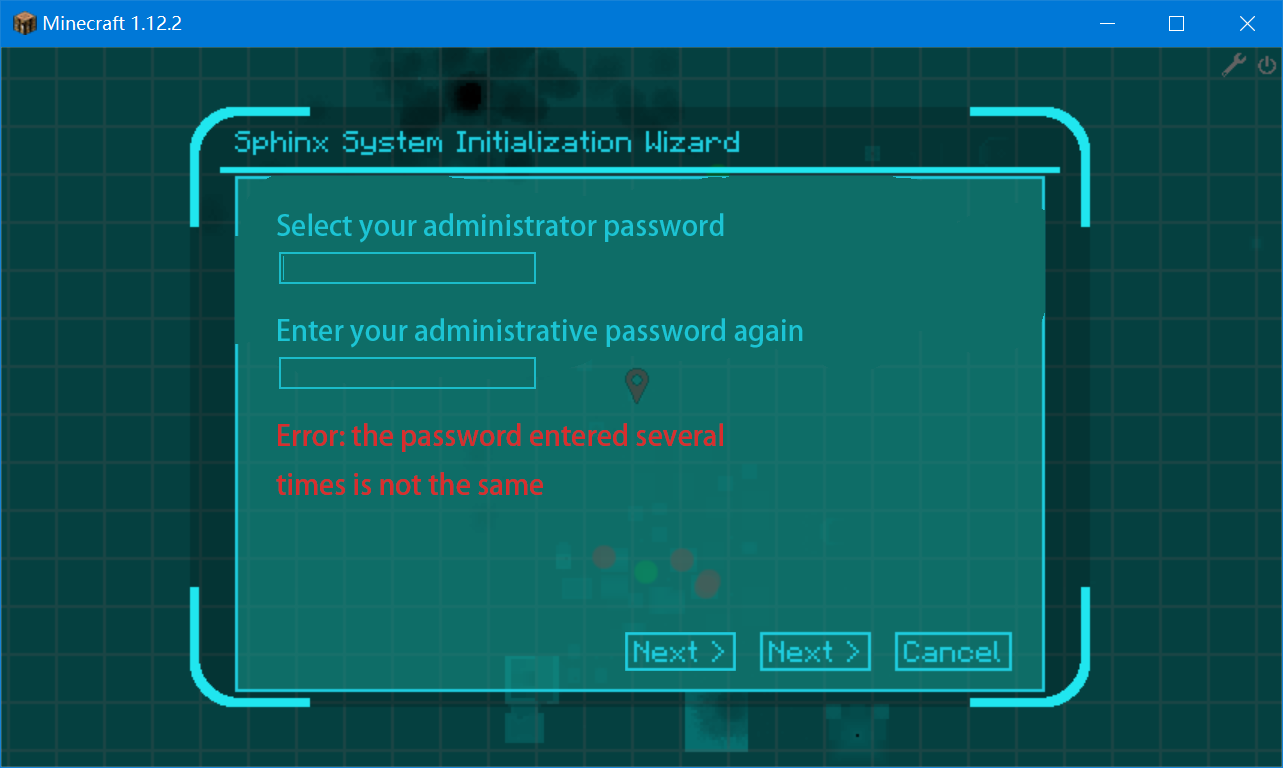
<style>
.page{position:relative;width:1283px;height:768px;background:#0e6d67}
.page>*{position:absolute;margin:0}
.t1{font:28px "AdobeHeitiStd-Regular";color:#1cc4d4}
.t2{font:28px "AdobeHeitiStd-Regular";color:#da2d2d}
</style>
<div class="page">
<p class="t1" style="left:277px;top:213px;width:447px;height:30px">Select your administrator password<br><br> password</p>
<p class="t1" style="left:278px;top:318px;width:525px;height:30px">Enter your administrative password again</p>
<p class="t2" style="left:276px;top:423px;width:447px;height:72px">Error: the password entered several times is not the same</p>
</div>
